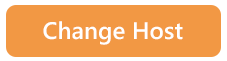
<style>
.page{position:relative;width:227px;height:61px;background:#f29844}
.page>*{position:absolute;margin:0}
.t1{font:23.9px "YuGothicUI-Semibold";color:#ffffff}
</style>
<div class="page">
<p class="t1" style="left:43px;top:21px;width:140px;height:24px">Change Host</p>
</div>
